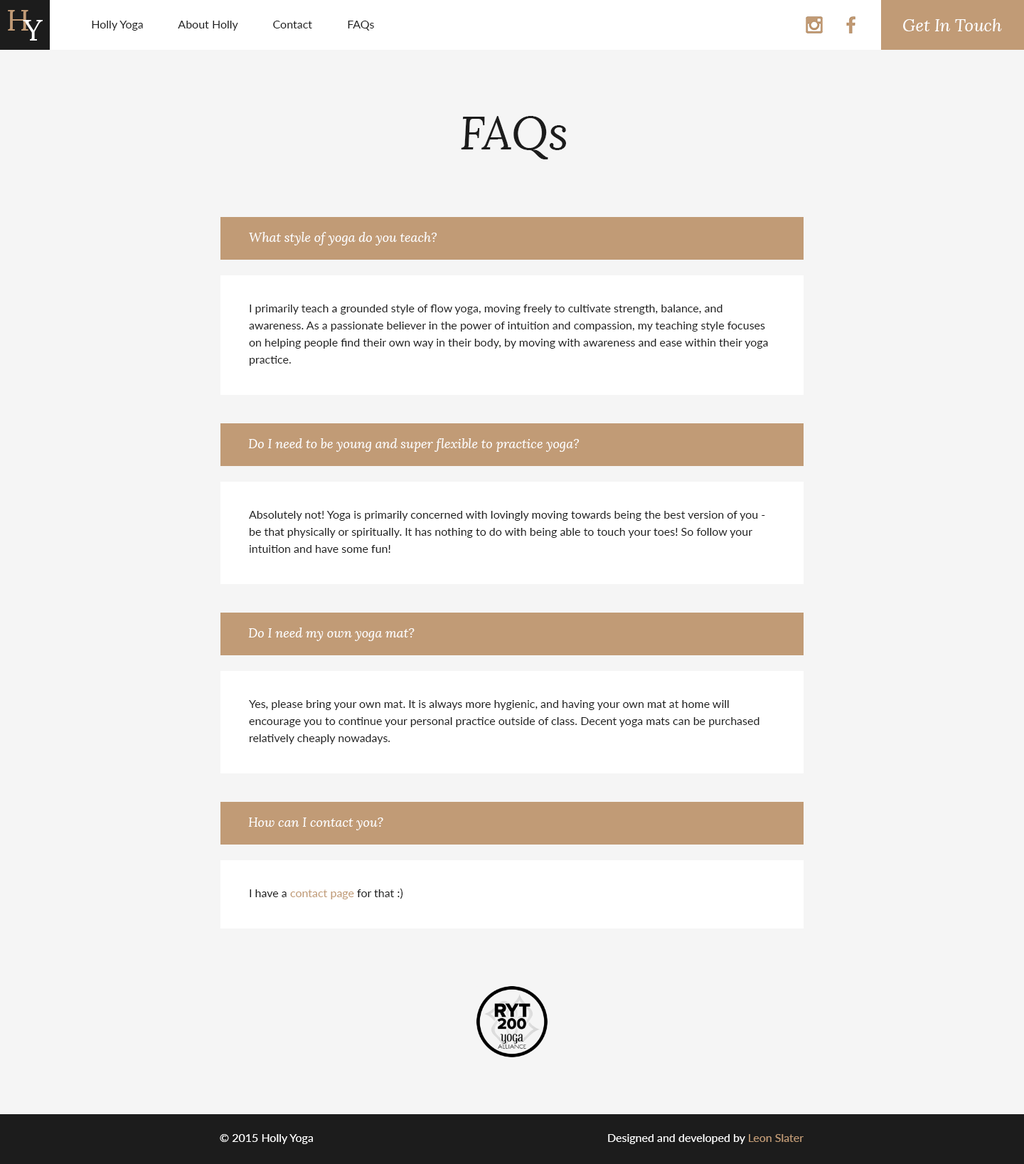
<style>
.page{position:relative;width:1024px;height:1164px;background:#f5f5f5}
.page>*{position:absolute;margin:0}
.t1{font:47px "Lora-Italic";color:#1c1c1c}
.t2{font:12.8px "Lora-Italic";color:#ffffff}
.t3{font:11.4px/17.1px "Lato-Regular";color:#1c1c1c}
.t4{font:11.4px "Lato-Regular";color:#c19b76}
.t5{font:11.4px "Lato-Regular";color:#1c1c1c}
</style>
<div class="page">
<p class="t1" style="left:461px;top:116px;width:105px;height:43px">FAQs</p>
<p class="t2" style="left:249px;top:232px;width:189px;height:13px">What style of yoga do you teach?</p>
<p class="t3" style="left:249px;top:305px;width:519px;height:61px">I primarily teach a grounded style of flow yoga, moving freely to cultivate strength, balance, and <br>awareness. As a passionate believer in the power of intuition and compassion, my teaching style focuses on helping people find their own way in their body, by moving with awareness and ease within their yoga practice.</p>
<p class="t2" style="left:248px;top:438px;width:332px;height:14px">Do I need to be young and super flexible to practice yoga?</p>
<p class="t3" style="left:249px;top:511px;width:517px;height:42px">Absolutely not! Yoga is primarily concerned with lovingly moving towards being the best version of you - be that physically or spiritually. It has nothing to do with being able to touch your toes! So follow your intuition and have some fun!</p>
<p class="t2" style="left:248px;top:627px;width:167px;height:14px">Do I need my own yoga mat?</p>
<p class="t3" style="left:249px;top:700px;width:511px;height:44px">Yes, please bring your own mat. It is always more hygienic, and having your own mat at home will <br>encourage you to continue your personal practice outside of class. Decent yoga mats can be purchased relatively cheaply nowadays.</p>
<p class="t2" style="left:248px;top:817px;width:135px;height:13px">How can I contact you?</p>
<p class="t4" style="left:250px;top:888px;width:153px;height:11px"><span class="t5">I have a </span>contact page<span class="t5"> for that :)</span></p>
</div>
